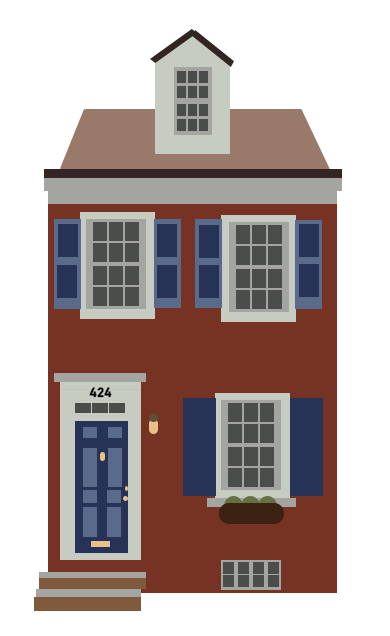
<style>
.page{position:relative;width:390px;height:636px;background:#ffffff}
.page>*{position:absolute;margin:0}
.t1{font:13.3px "Bahnschrift-Bold";color:#000000;font-weight:bold;scale:1.05 1}
</style>
<div class="page">
<p class="t1" style="left:89px;top:387px;width:23px;height:11px">424</p>
</div>
